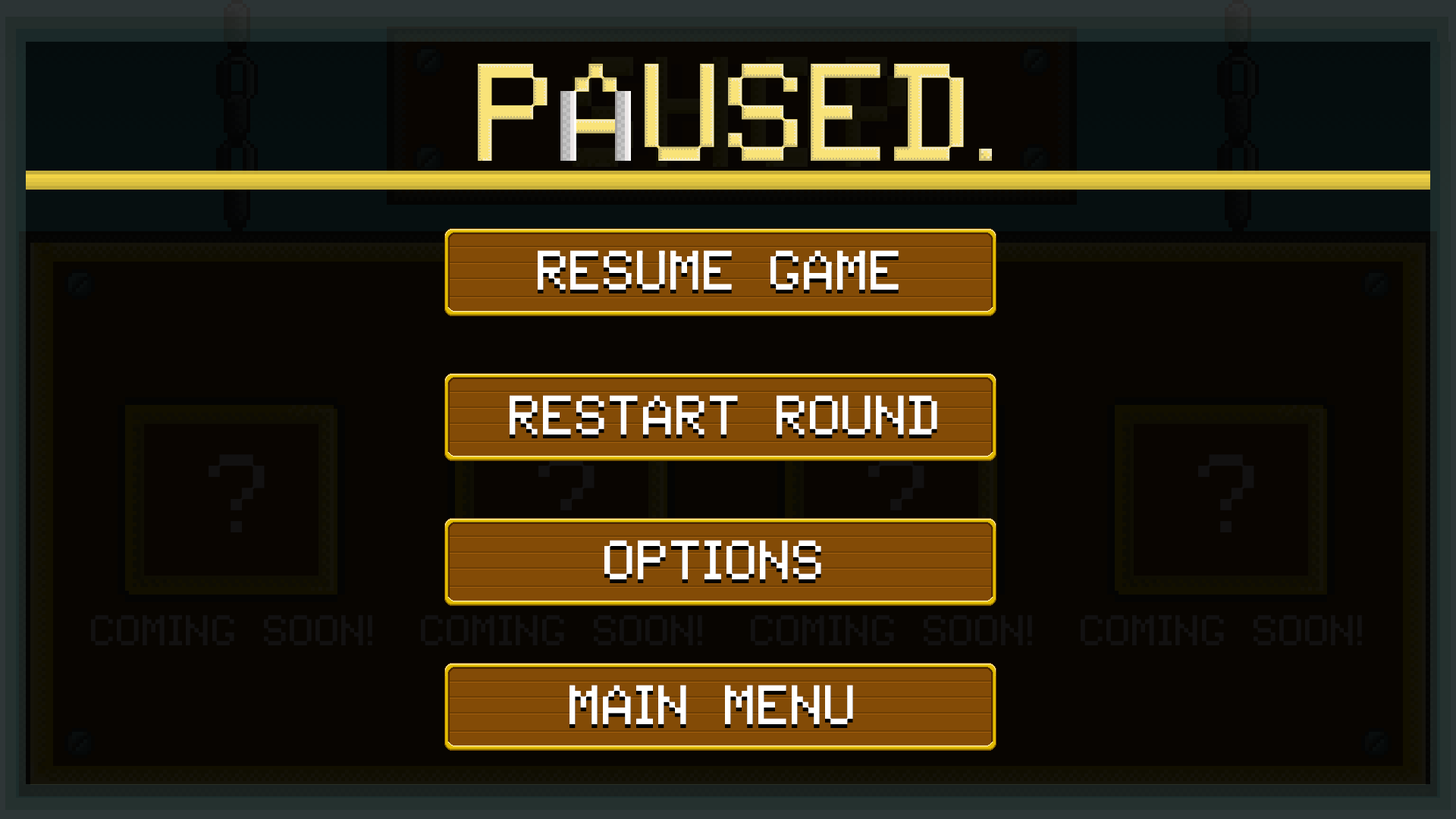
<style>
.page{position:relative;width:1456px;height:819px;background:#080501}
.page>*{position:absolute;margin:0}
.t1{font:142.2px "Tandysoft"}
.t2{font:56.9px "Tandysoft";color:#ffffff}
</style>
<div class="page">
<p class="t1" style="left:478px;top:64px;width:486px;height:97px">Paused</p>
<p class="t2" style="left:510px;top:395px;width:427px;height:40px">restart round</p>
<p class="t2" style="left:604px;top:540px;width:217px;height:39px">Options</p>
<p class="t2" style="left:570px;top:685px;width:283px;height:39px">main menu</p>
</div>
